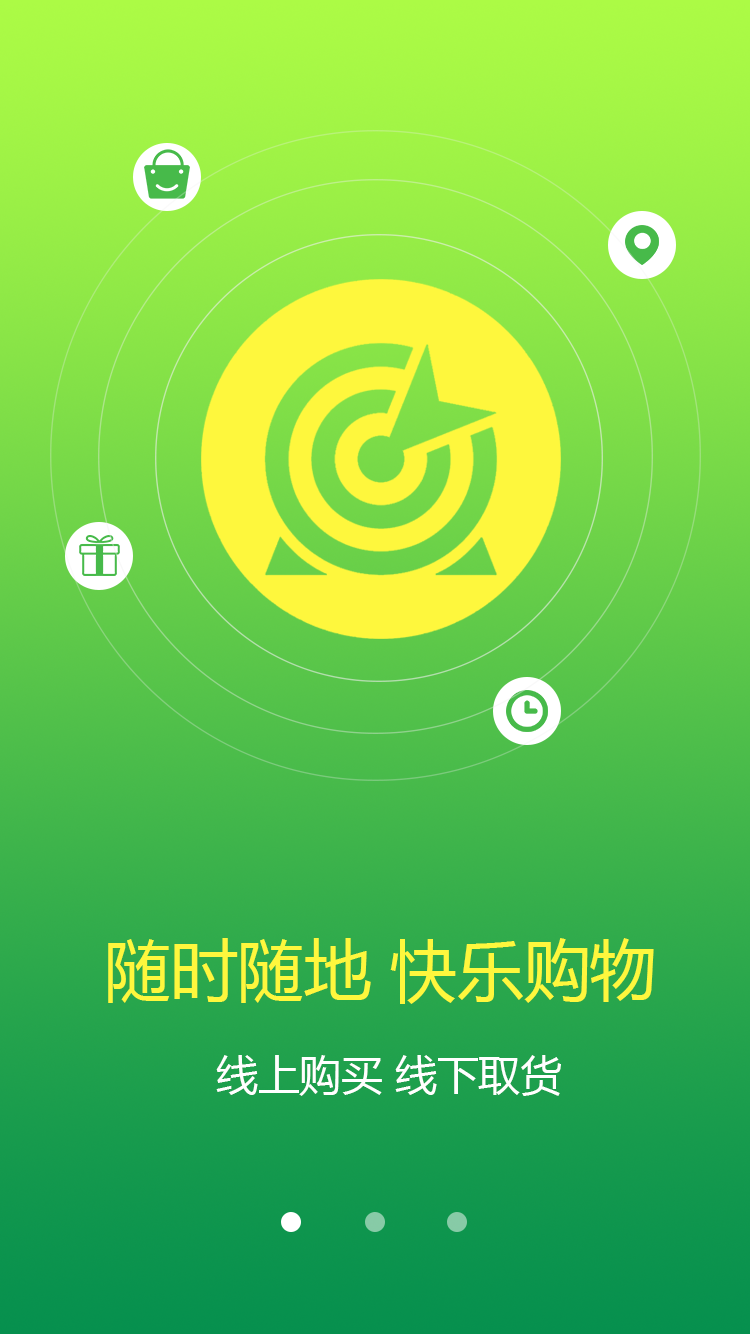
<style>
.page{position:relative;width:750px;height:1334px}
.page>*{position:absolute;margin:0}
.t1{font:66.7px "MicrosoftYaHei";color:#fef73d}
.t2{font:41.7px "MicrosoftYaHei";color:#ffffff}
</style>
<div class="page">
<p class="t1" style="left:108px;top:938px;width:546px;height:66px">随时随地 快乐购物</p>
<p class="t2" style="left:216px;top:1055px;width:345px;height:41px">线上购买 线下取货</p>
</div>
